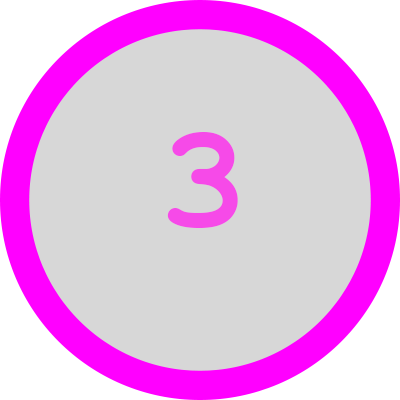
<style>
.page{position:relative;width:400px;height:400px;background:#d7d7d7}
.page>*{position:absolute;margin:0}
.t1{font:150px "CourierNewPS-BoldMT";color:#f64ae8}
</style>
<div class="page">
<p class="t1" style="left:167px;top:132px;width:71px;height:96px">3</p>
</div>
